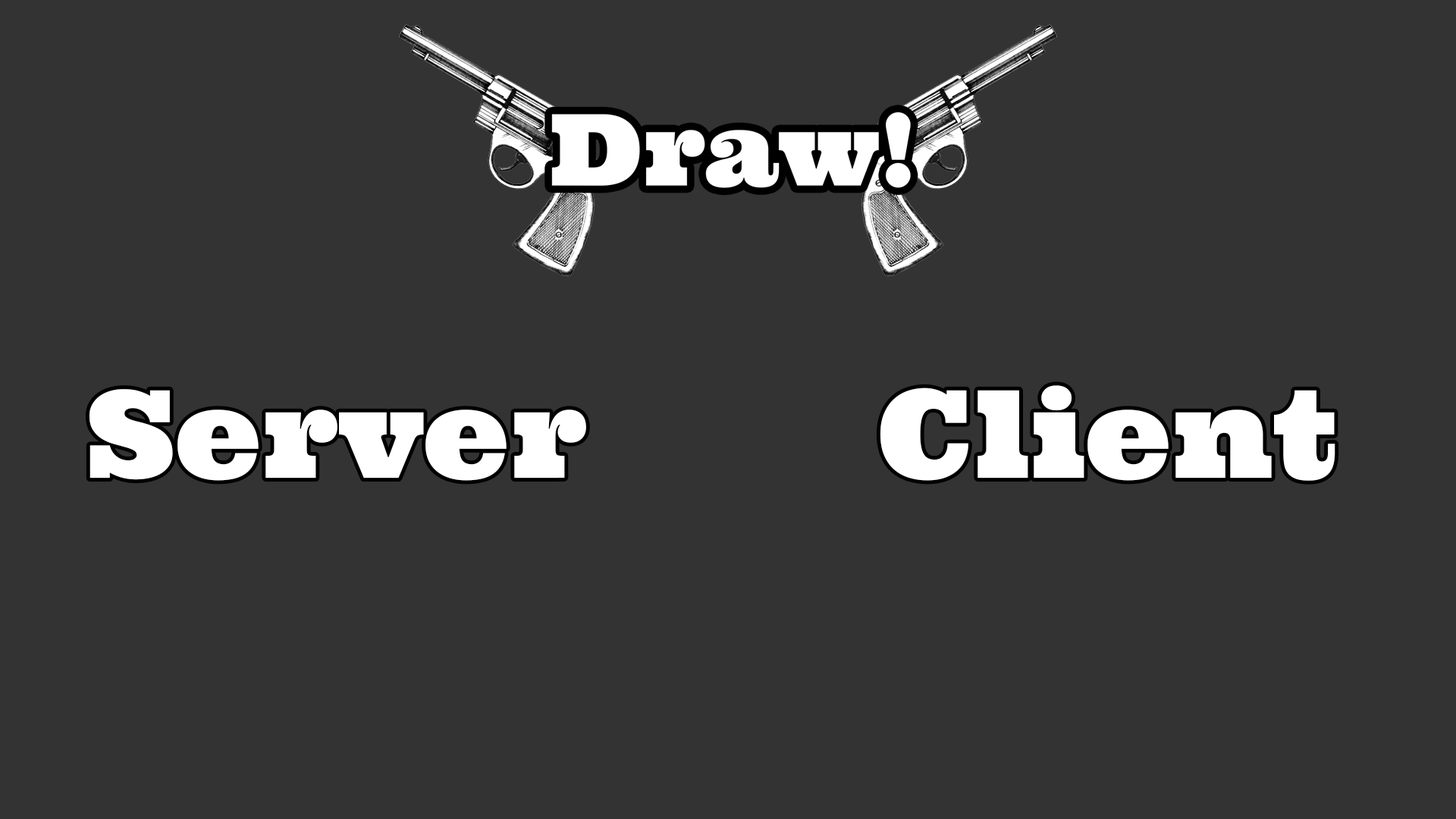
<style>
.page{position:relative;width:1456px;height:819px;background:#333333}
.page>*{position:absolute;margin:0}
.t1{font:121.6px "Ultra";color:#ffffff}
</style>
<div class="page">
<p class="t1" style="left:89px;top:389px;width:497px;height:92px">Server</p>
<p class="t1" style="left:880px;top:385px;width:455px;height:96px">Client</p>
</div>
